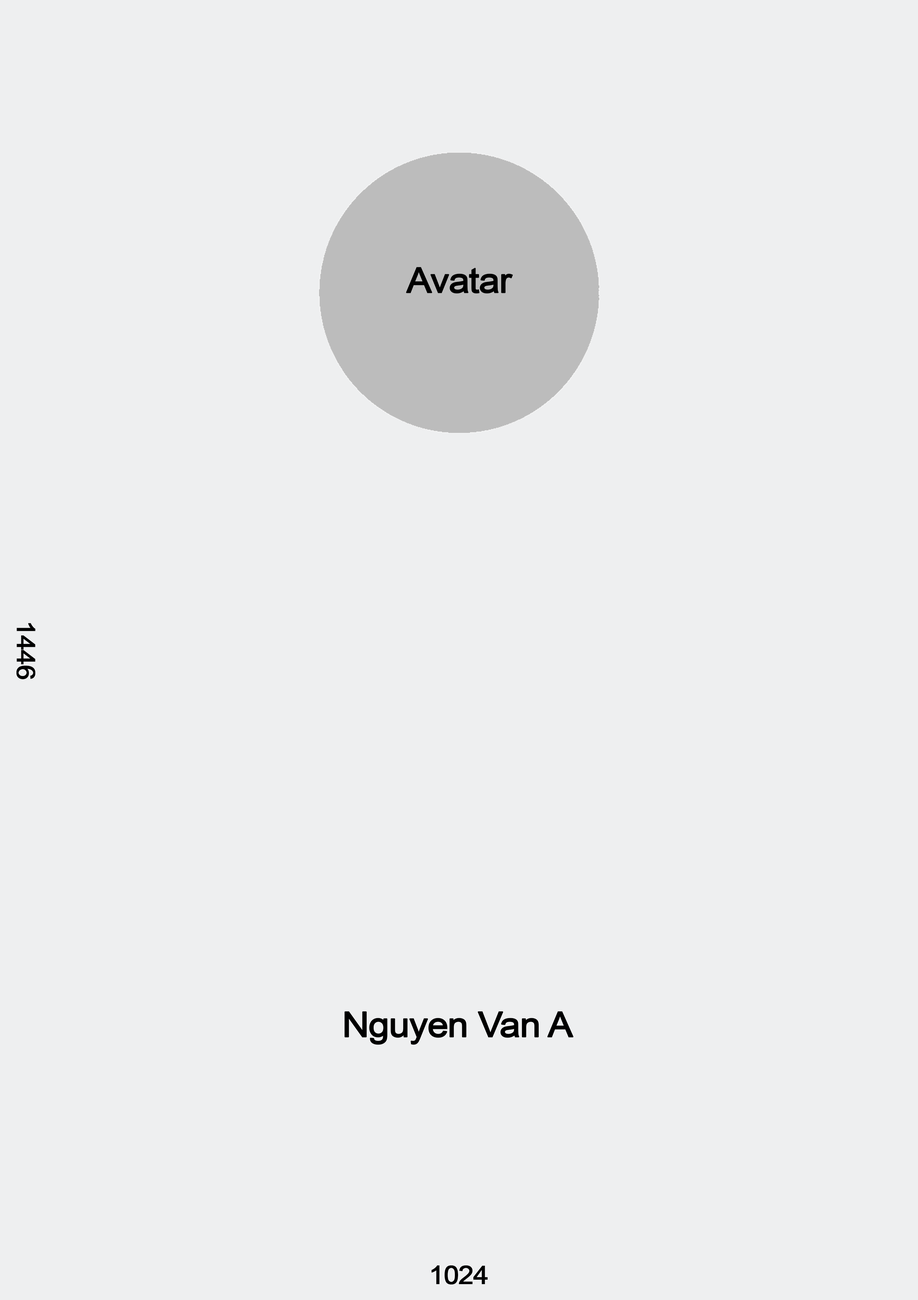
<style>
.page{position:relative;width:918px;height:1300px;background:#eeeff0}
.page>*{position:absolute;margin:0}
.t1{font:34.9px "ArialMT";letter-spacing:-0.04em;color:#000000;font-weight:bold;scale:1.07 1}
.t2{font:25.4px "ArialMT";letter-spacing:-0.04em;color:#000000;font-weight:bold;scale:1.07 1}
</style>
<div class="page">
<p class="t1" style="left:406px;top:267px;width:107px;height:26px">Avatar</p>
<p class="t2" style="left:16px;top:623px;width:20px;height:56px;rotate:90deg">1446</p>
<p class="t1" style="left:344px;top:1011px;width:229px;height:33px">Nguyen Van A</p>
<p class="t2" style="left:431px;top:1265px;width:56px;height:19px">1024</p>
</div>
